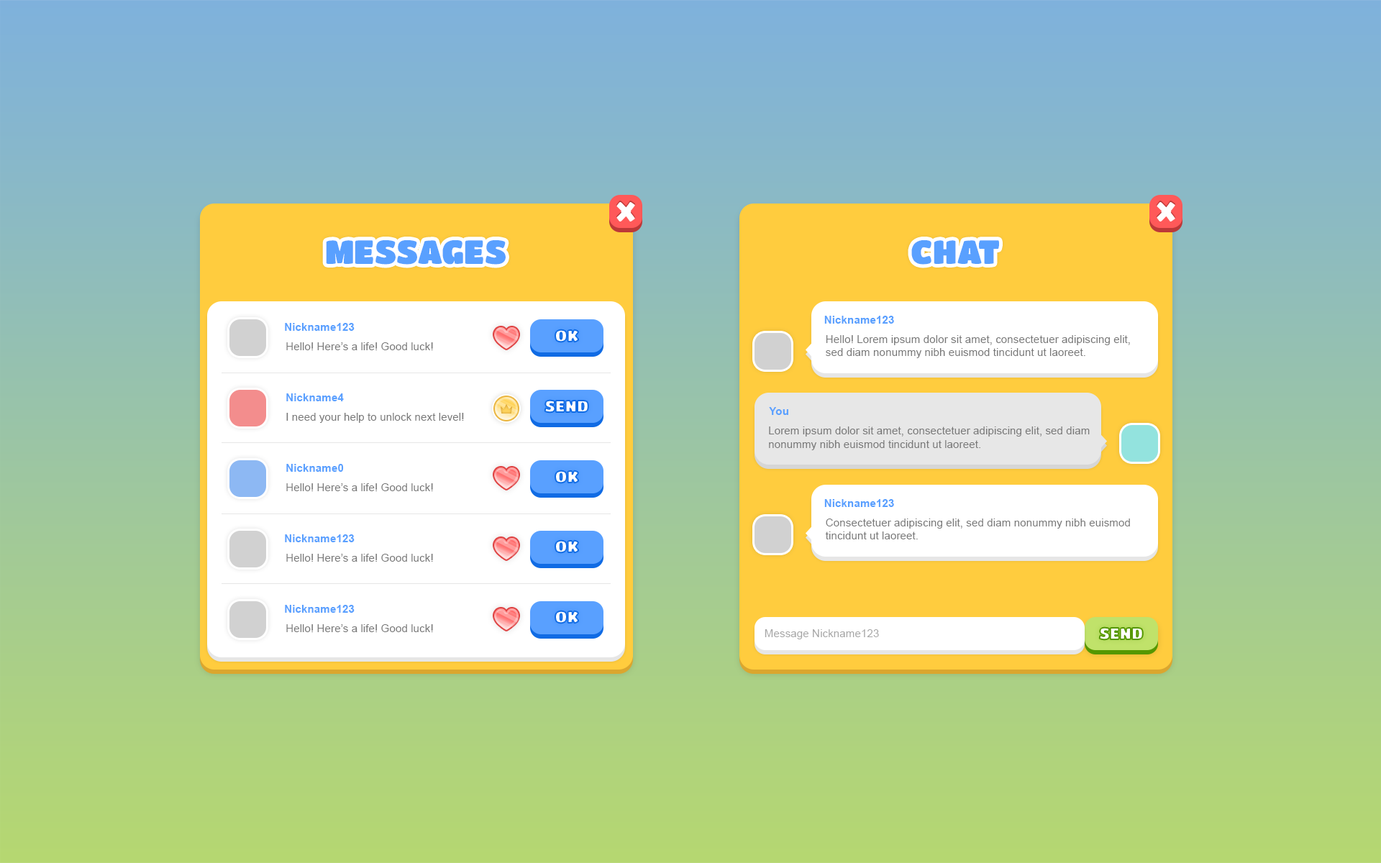
<style>
.page{position:relative;width:1381px;height:863px}
.page>*{position:absolute;margin:0}
.t1{font:33px "TitanOne";letter-spacing:0.01em;color:#59a0ff;text-transform:uppercase}
.t2{font:11px "Arial-BoldMT";color:#59a0ff}
.t3{font:16.1px "TitanOne";text-transform:uppercase}
.t4{font:11px "ArialMT";color:#787878}
.t5{font:11px/12.5px "ArialMT";color:#787878}
.t6{font:11px "ArialMT";color:#a7a7a7}
</style>
<div class="page">
<p class="t1" style="left:326px;top:240px;width:180px;height:25px">messages</p>
<p class="t1" style="left:911px;top:240px;width:88px;height:25px">chat</p>
<p class="t2" style="left:824px;top:316px;width:70px;height:8px">Nickname123</p>
<p class="t2" style="left:285px;top:323px;width:70px;height:8px">Nickname123</p>
<p class="t3" style="left:555px;top:329px;width:23px;height:13px">ok</p>
<p class="t4" style="left:826px;top:335px;width:304px;height:23px"><span class="t5">Hello! </span>Lorem ipsum dolor sit amet, consectetuer adipiscing elit, <br>sed diam nonummy nibh euismod tincidunt ut laoreet.</p>
<p class="t4" style="left:286px;top:342px;width:147px;height:8px">Hello! Here’s a life! Good luck!</p>
<p class="t2" style="left:286px;top:394px;width:58px;height:7px">Nickname4</p>
<p class="t3" style="left:545px;top:400px;width:43px;height:13px">send</p>
<p class="t4" style="left:286px;top:413px;width:178px;height:10px">I need your help to unlock next level!</p>
<p class="t2" style="left:769px;top:407px;width:19px;height:8px">You</p>
<p class="t4" style="left:769px;top:427px;width:321px;height:23px">Lorem ipsum dolor sit amet, consectetuer adipiscing elit, sed diam <br>nonummy nibh euismod tincidunt ut laoreet.</p>
<p class="t2" style="left:286px;top:464px;width:58px;height:8px">Nickname0</p>
<p class="t3" style="left:555px;top:470px;width:23px;height:13px">ok</p>
<p class="t4" style="left:286px;top:483px;width:147px;height:8px">Hello! Here’s a life! Good luck!</p>
<p class="t2" style="left:824px;top:499px;width:70px;height:8px">Nickname123</p>
<p class="t4" style="left:825px;top:519px;width:305px;height:21px"><span class="t5">C</span>onsectetuer adipiscing elit, sed diam nonummy nibh euismod <br>tincidunt ut laoreet.</p>
<p class="t2" style="left:285px;top:535px;width:70px;height:7px">Nickname123</p>
<p class="t3" style="left:555px;top:540px;width:23px;height:13px">ok</p>
<p class="t4" style="left:286px;top:554px;width:147px;height:8px">Hello! Here’s a life! Good luck!</p>
<p class="t2" style="left:285px;top:605px;width:70px;height:8px">Nickname123</p>
<p class="t3" style="left:555px;top:611px;width:23px;height:13px">ok</p>
<p class="t4" style="left:286px;top:624px;width:147px;height:8px">Hello! Here’s a life! Good luck!</p>
<p class="t6" style="left:765px;top:629px;width:114px;height:11px">Message Nickname123</p>
<p class="t3" style="left:1099px;top:627px;width:44px;height:13px">send</p>
</div>
